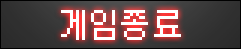
<style>
.page{position:relative;width:241px;height:49px}
.page>*{position:absolute;margin:0}
.t1{font:36px "morris9";color:#ffffff}
</style>
<div class="page">
<p class="t1" style="left:61px;top:10px;width:120px;height:30px">게임종료</p>
</div>
